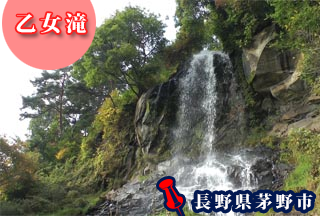
<style>
.page{position:relative;width:320px;height:216px}
.page>*{position:absolute;margin:0}
.t1{font:21px "KozMinPr6N-Heavy";letter-spacing:0.2em;color:#ffffff}
.t2{font:17px "KozMinPr6N-Heavy";letter-spacing:0.2em;color:#ffffff}
</style>
<div class="page">
<p class="t1" style="left:16px;top:13px;width:71px;height:20px">乙女滝</p>
<p class="t2" style="left:194px;top:193px;width:119px;height:17px">長野県茅野市</p>
</div>
